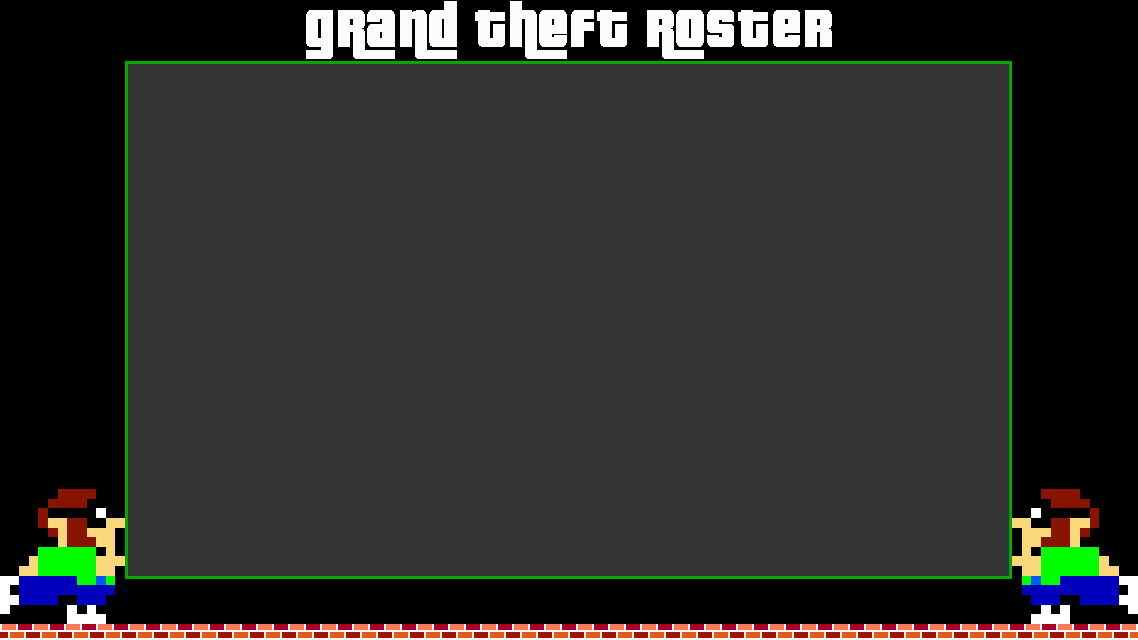
<style>
.page{position:relative;width:1138px;height:640px;background:#333333}
.page>*{position:absolute;margin:0}
.t1{font:58px "PricedownBl-Regular";letter-spacing:0.03em;color:#fcfcfc}
</style>
<div class="page">
<p class="t1" style="left:306px;top:1px;width:526px;height:58px">grand theft roster</p>
</div>
